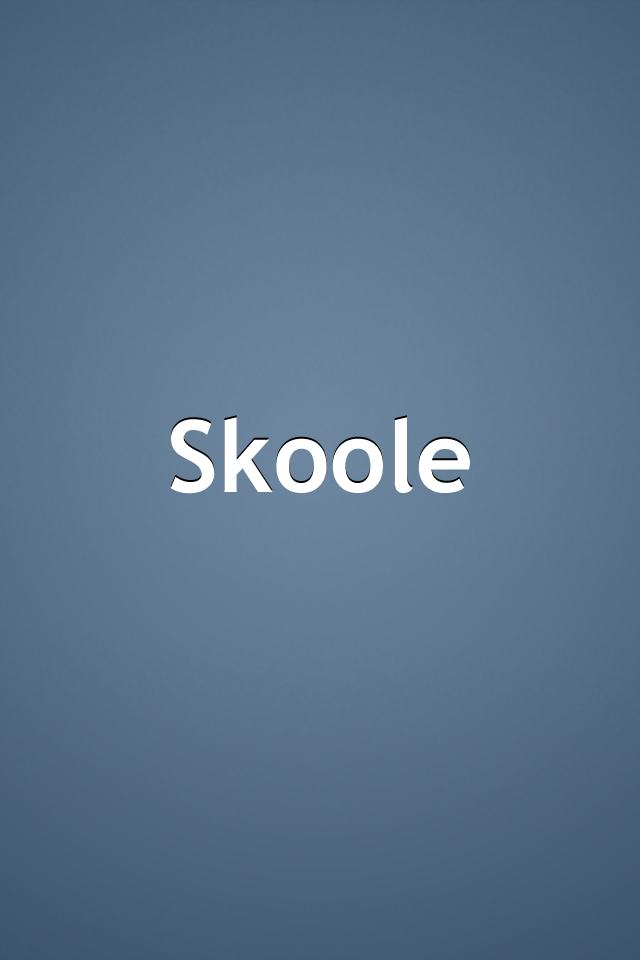
<style>
.page{position:relative;width:640px;height:960px}
.page>*{position:absolute;margin:0}
.t1{font:100px "TrebuchetMS-Bold";color:#ffffff}
</style>
<div class="page">
<p class="t1" style="left:170px;top:417px;width:300px;height:77px">Skoole</p>
</div>
